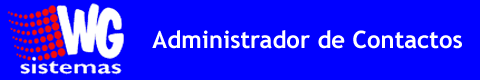
<style>
.page{position:relative;width:480px;height:80px;background:#0000ff}
.page>*{position:absolute;margin:0}
.t1{font:24px "TrebuchetMS-Bold";color:#ffffff}
</style>
<div class="page">
<p class="t1" style="left:152px;top:30px;width:310px;height:19px">Administrador de Contactos</p>
</div>
